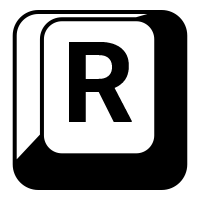
<style>
.page{position:relative;width:200px;height:200px;background:#ffffff}
.page>*{position:absolute;margin:0}
.t1{font:113.2px "Roboto-Bold";color:#000000}
</style>
<div class="page">
<p class="t1" style="left:69px;top:42px;width:63px;height:80px">R</p>
</div>
